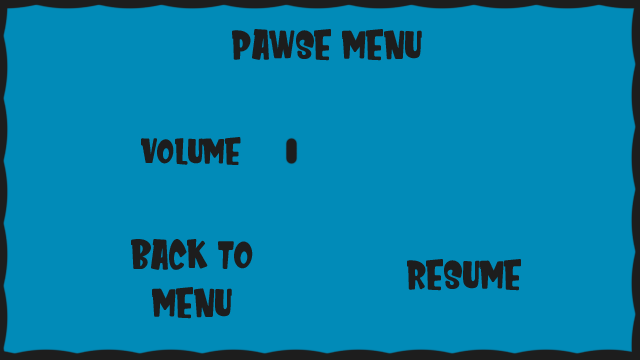
<style>
.page{position:relative;width:640px;height:360px;background:#018bb8}
.page>*{position:absolute;margin:0}
.t1{font:40px "KidsZone";color:#1d1d1d}
.t2{font:36px "KidsZone";color:#1d1d1d}
</style>
<div class="page">
<p class="t1" style="left:232px;top:29px;width:190px;height:32px">Pawse menu</p>
<p class="t2" style="left:141px;top:137px;width:100px;height:28px">volume</p>
<p class="t1" style="left:131px;top:239px;width:122px;height:80px;text-align:center">back to <br>menu</p>
<p class="t1" style="left:407px;top:259px;width:114px;height:32px">resume</p>
</div>
